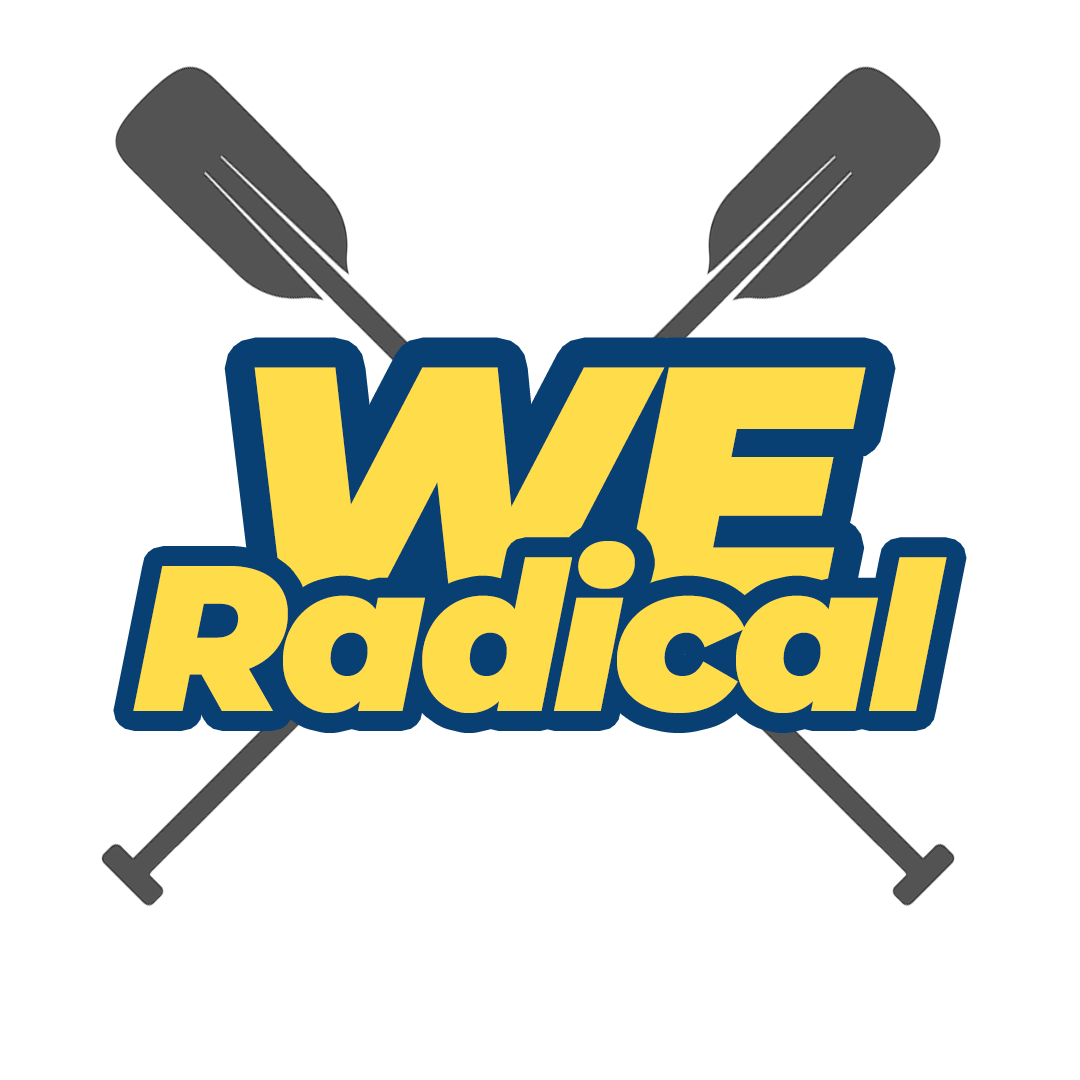
<style>
.page{position:relative;width:1080px;height:1080px;background:#ffffff}
.page>*{position:absolute;margin:0}
.t1{font:345.2px "Montserrat-BlackItalic";letter-spacing:-0.04em;color:#ffdd4a}
.t2{font:207.1px "Montserrat-BlackItalic";letter-spacing:-0.04em;color:#ffdd4a}
</style>
<div class="page">
<p class="t1" style="left:254px;top:367px;width:612px;height:243px">WE</p>
<p class="t2" style="left:133px;top:541px;width:814px;height:172px">Radical</p>
</div>
